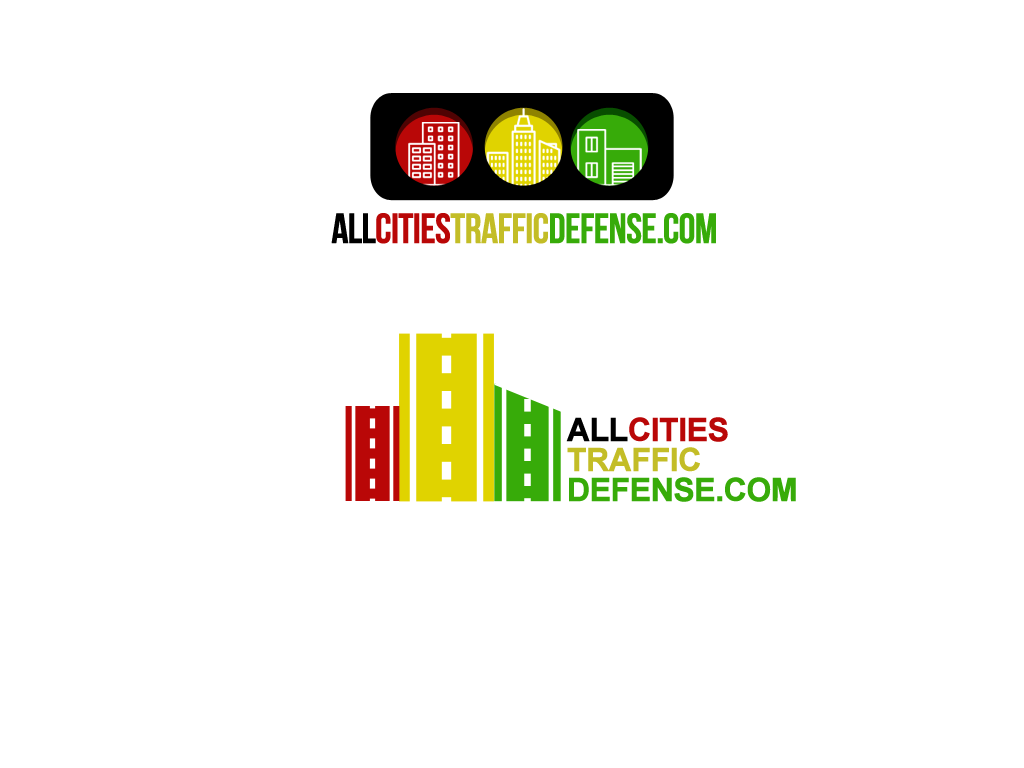
<style>
.page{position:relative;width:1024px;height:768px;background:#ffffff}
.page>*{position:absolute;margin:0}
.t1{font:42px "BebasNeue";letter-spacing:-0.04em;color:#37ab09;text-transform:uppercase;font-weight:bold}
.t2{font:42px "BebasNeue";letter-spacing:-0.04em;color:#000000;text-transform:uppercase;font-weight:bold}
.t3{font:42px "BebasNeue";letter-spacing:-0.04em;color:#b90707;text-transform:uppercase;font-weight:bold}
.t4{font:42px "BebasNeue";letter-spacing:-0.04em;color:#c3bd27;text-transform:uppercase;font-weight:bold}
.t5{font:32px/30px "Arial-BoldMT";letter-spacing:-0.04em;color:#37ab09;text-transform:uppercase;font-weight:bold}
.t6{font:32px/30px "Arial-BoldMT";letter-spacing:-0.04em;color:#000000;text-transform:uppercase;font-weight:bold}
.t7{font:32px/30px "Arial-BoldMT";letter-spacing:-0.04em;color:#b90707;text-transform:uppercase;font-weight:bold}
.t8{font:32px/30px "Arial-BoldMT";letter-spacing:-0.04em;color:#c3bd27;text-transform:uppercase;font-weight:bold}
</style>
<div class="page">
<p class="t1" style="left:331px;top:213px;width:385px;height:31px"><span class="t2">All</span><span class="t3">Cities</span><span class="t4">traffic</span>defense.com</p>
<p class="t5" style="left:566px;top:417px;width:230px;height:85px"><span class="t6">All</span><span class="t7">Cities<br></span><span class="t8">traffic<br></span>defense.com</p>
</div>
